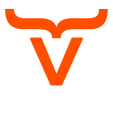
<style>
.page{position:relative;width:113px;height:113px;background:#ffffff}
.page>*{position:absolute;margin:0}
.t1{font:110.4px "MicrosoftJhengHeiBold";color:#ff4e00}
.t2{font:60.7px "MicrosoftJhengHeiBold";color:#ff4e00;font-weight:bold;scale:1.25 1}
</style>
<div class="page">
<p class="t1" style="left:5px;top:9px;width:103px;height:30px;rotate:-90deg">{</p>
<p class="t2" style="left:30px;top:37px;width:53px;height:49px">V</p>
</div>
